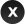
<style>
.page{position:relative;width:25px;height:24px;background:#ffffff}
.page>*{position:absolute;margin:0}
.t1{font:13.5px "Montserrat-Bold";color:#ffffff;scale:1.09 1}
</style>
<div class="page">
<p class="t1" style="left:8px;top:7px;width:10px;height:10px">X</p>
</div>
